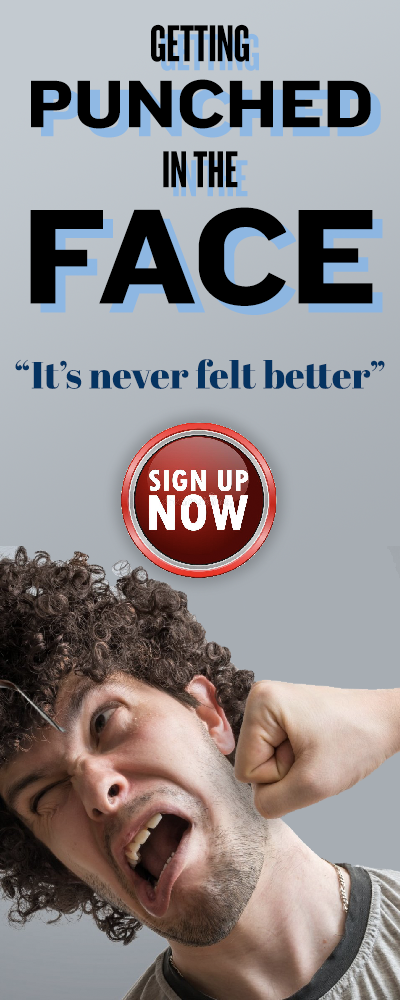
<style>
.page{position:relative;width:400px;height:1000px}
.page>*{position:absolute;margin:0}
.t1{font:54px/64px "Knockout-HTF67-FullBantamwt";color:#000000}
.t2{font:70px/66px "Knockout-HTF52-Cruiserweight";color:#000000}
.t3{font:54px/60px "Knockout-HTF67-FullBantamwt";color:#000000}
.t4{font:140px/116px "Knockout-HTF52-Cruiserweight";color:#000000}
.t5{font:54px/64px "Knockout-HTF67-FullBantamwt"}
.t6{font:70px/66px "Knockout-HTF52-Cruiserweight"}
.t7{font:54px/60px "Knockout-HTF67-FullBantamwt"}
.t8{font:140px/116px "Knockout-HTF52-Cruiserweight"}
.t9{font:38px "AbrilFatface-Regular";color:#053361}
</style>
<div class="page">
<p class="t1" style="left:30px;top:24px;width:343px;height:282px;text-align:center">GETTING<br><span class="t2">PUNCHED<br></span><span class="t3">IN THE<br></span><span class="t4">FACE</span></p>
<p class="t5" style="left:40px;top:33px;width:343px;height:282px;text-align:center">GETTING<br><span class="t6">PUNCHED<br></span><span class="t7">IN THE<br></span><span class="t8">FACE</span></p>
<p class="t9" style="left:15px;top:359px;width:370px;height:30px">“It’s never felt better”</p>
</div>
